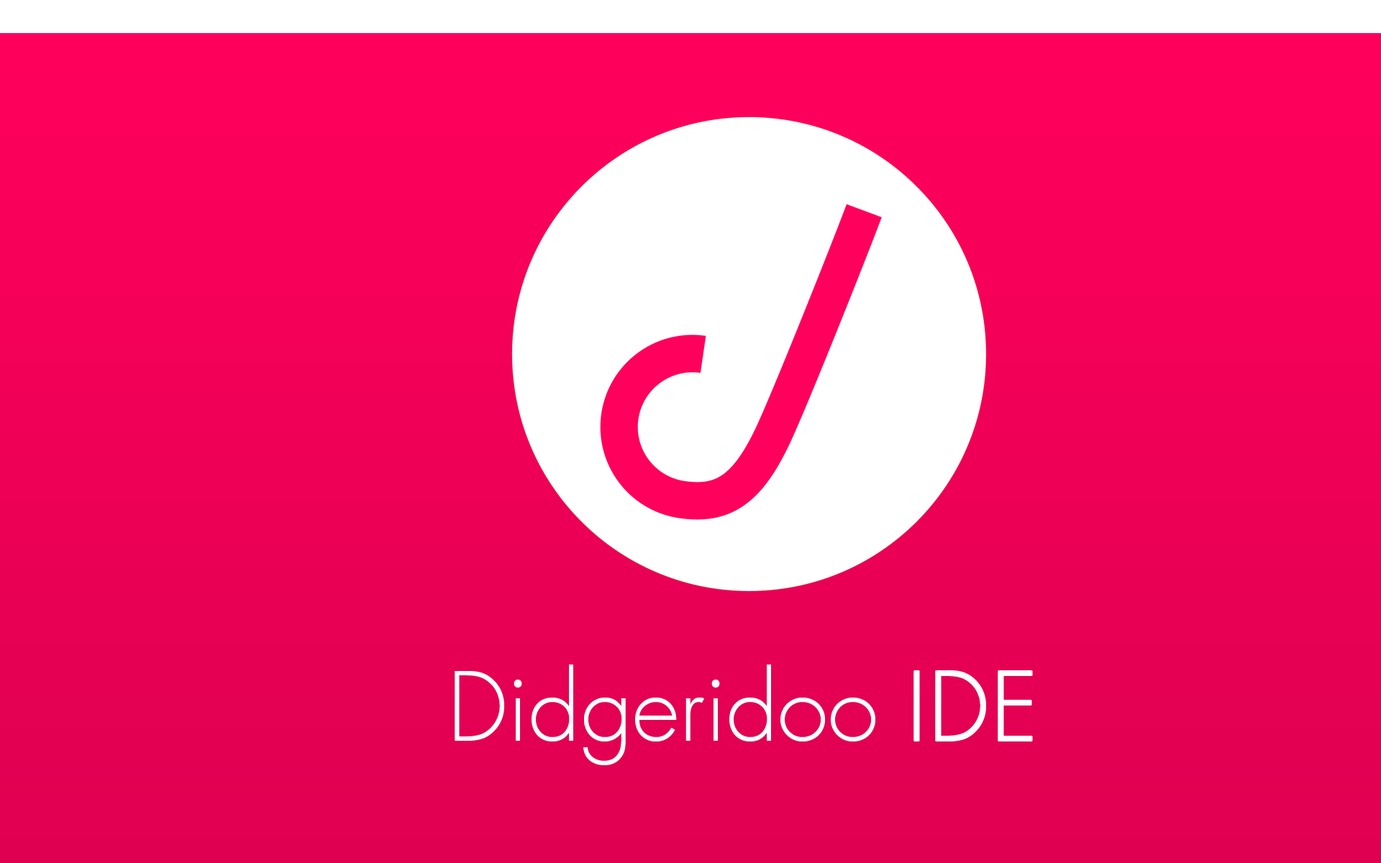
<style>
.page{position:relative;width:1381px;height:863px}
.page>*{position:absolute;margin:0}
.t1{font:92px "FuturaLT-Light";color:#ffffff}
.t2{font:92px "FuturaLT-Light";color:#ffffff;font-weight:bold}
</style>
<div class="page">
<p class="t1" style="left:455px;top:665px;width:578px;height:100px">Didgeridoo <span class="t2">IDE</span></p>
</div>
